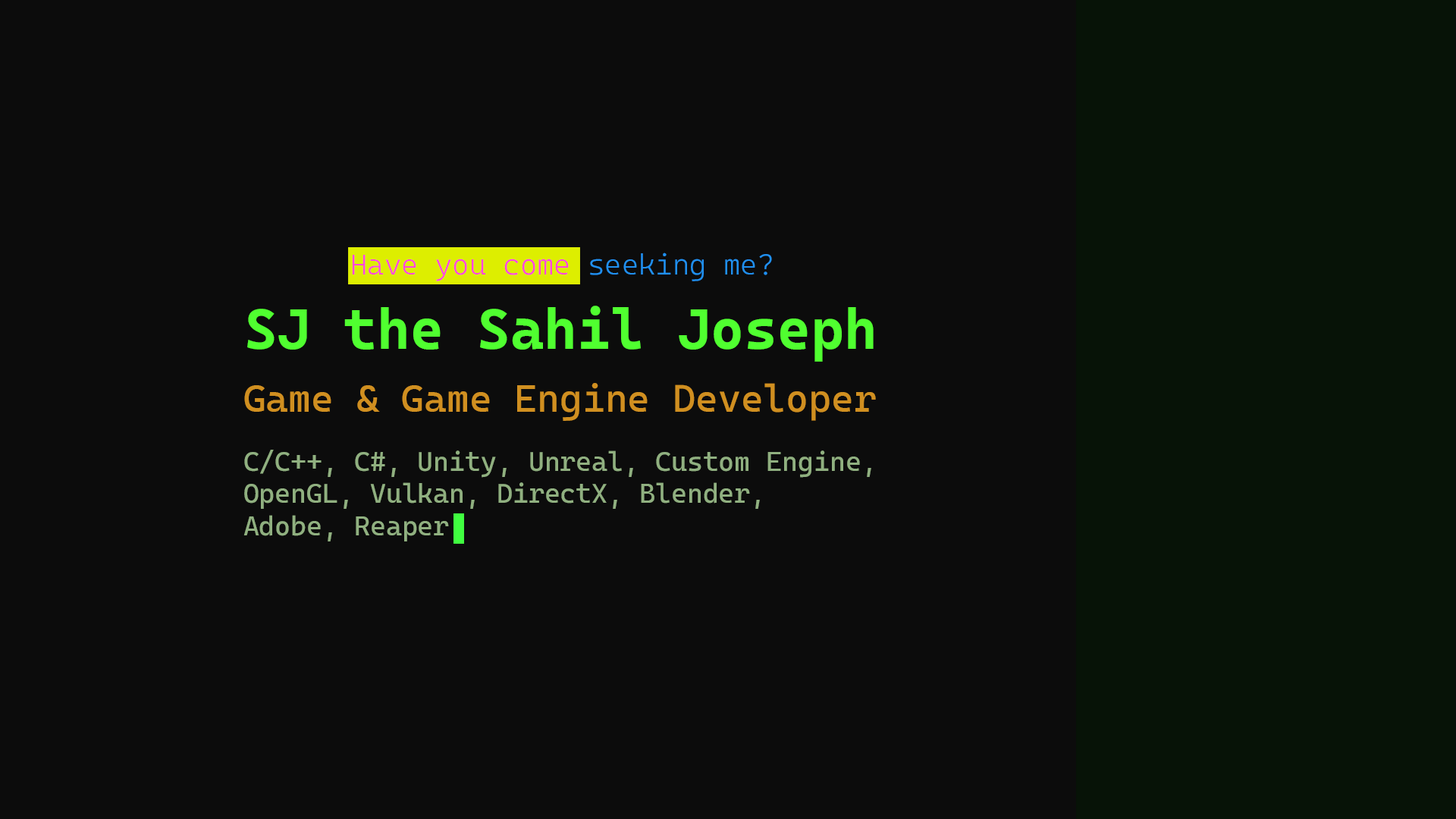
<style>
.page{position:relative;width:1456px;height:819px;background:#0c0c0c}
.page>*{position:absolute;margin:0}
.t1{font:28.9px "CascadiaMonoRoman-Light";color:#ff44dd}
.t2{font:28.9px "CascadiaMonoRoman-Light";color:#2090f0}
.t3{font:56.9px "CascadiaMonoRoman-Bold";color:#50ff30}
.t4{font:38.6px "CascadiaMono-Regular";color:#d08f20}
.t5{font:27px "CascadiaMono-Regular";color:#90b080}
</style>
<div class="page">
<p class="t1" style="left:352px;top:253px;width:420px;height:28px">Have you come<span class="t2"> seeking me?</span></p>
<p class="t3" style="left:247px;top:306px;width:627px;height:56px">SJ the Sahil Joseph</p>
<p class="t4" style="left:244px;top:383px;width:632px;height:38px">Game &amp; Game Engine Developer</p>
<p class="t5" style="left:243px;top:450px;width:628px;height:91px">C/C++, C#, Unity, Unreal, Custom Engine,<br>OpenGL, Vulkan, DirectX, Blender,<br>Adobe, Reaper</p>
</div>
